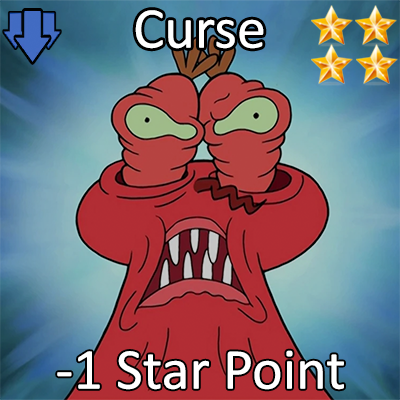
<style>
.page{position:relative;width:400px;height:400px}
.page>*{position:absolute;margin:0}
.t1{font:100px "Calibri";color:#ffffff}
</style>
<div class="page">
<p class="t1" style="left:135px;top:10px;width:129px;height:39px">Curse</p>
<p class="t1" style="left:57px;top:350px;width:287px;height:40px">-1 Star Point</p>
</div>
